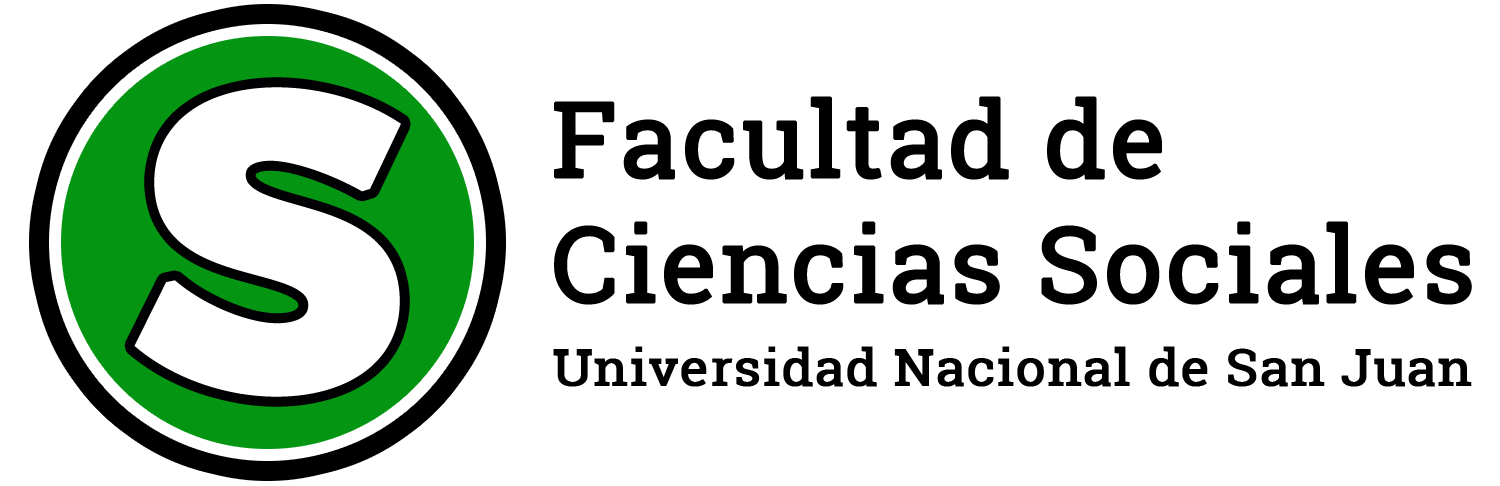
<style>
.page{position:relative;width:1500px;height:486px;background:#ffffff}
.page>*{position:absolute;margin:0}
.t1{font:416.7px "Montserrat-Bold";letter-spacing:0.009em;color:#ffffff;font-weight:bold}
.t2{font:50px/83.4px "RobotoSlab-Regular";letter-spacing:0.009em;color:#000000;font-weight:bold;scale:1.05 1}
.t3{font:104.2px "RobotoSlab-Regular";letter-spacing:0.009em;color:#000000;font-weight:bold}
</style>
<div class="page">
<p class="t1" style="left:134px;top:87px;width:267px;height:310px">S</p>
<p class="t2" style="left:553px;top:96px;width:919px;height:291px"><span class="t3">Facultad de<br>Ciencias Sociales<br></span>Universidad Nacional de San Juan</p>
</div>
